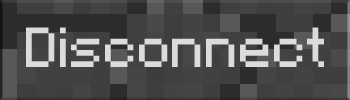
<style>
.page{position:relative;width:350px;height:100px}
.page>*{position:absolute;margin:0}
.t1{font:45px "Minecraftia";color:#dcdcdc}
</style>
<div class="page">
<p class="t1" style="left:26px;top:27px;width:298px;height:40px">Disconnect</p>
</div>
